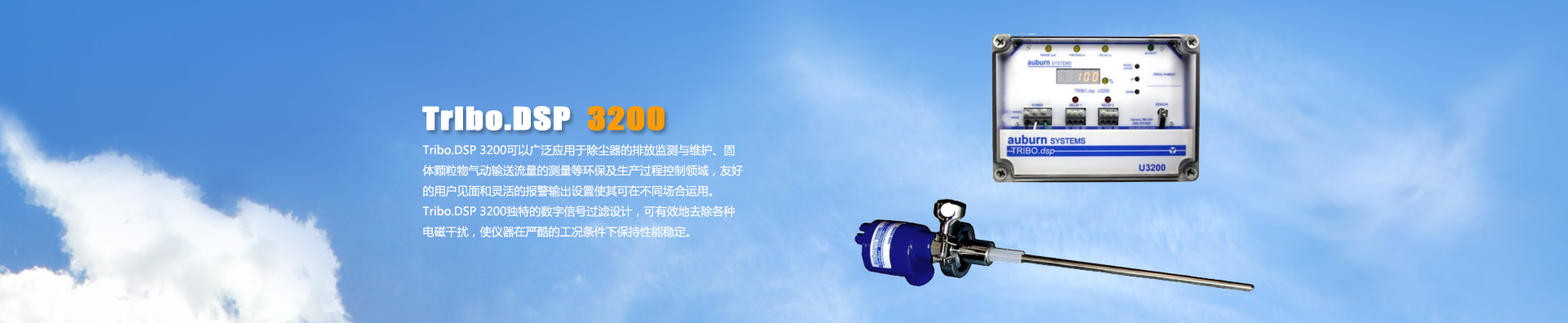
<style>
.page{position:relative;width:1568px;height:323px}
.page>*{position:absolute;margin:0}
.t1{font:28.6px "Impact";letter-spacing:0.025em;color:#ffffff;font-weight:bold;scale:1.2 1}
.t2{font:28.6px "Impact";letter-spacing:0.025em;color:#fe9b03;font-weight:bold;scale:1.2 1}
.t3{font:11.4px/20.4px "MicrosoftYaHei";color:#f9fafe}
</style>
<div class="page">
<p class="t1" style="left:422px;top:106px;width:243px;height:25px">Tribo.DSP  <span class="t2">3200</span></p>
<p class="t3" style="left:422px;top:145px;width:321px;height:93px">Tribo.DSP 3200可以广泛应用于除尘器的排放监测与维护、固体颗粒物气动输送流量的测量等环保及生产过程控制领域，友好的用户见面和灵活的报警输出设置使其可在不同场合运用。Tribo.DSP 3200独特的数字信号过滤设计，可有效地去除各种电磁干扰，使仪器在严酷的工况条件下保持性能稳定。</p>
</div>
